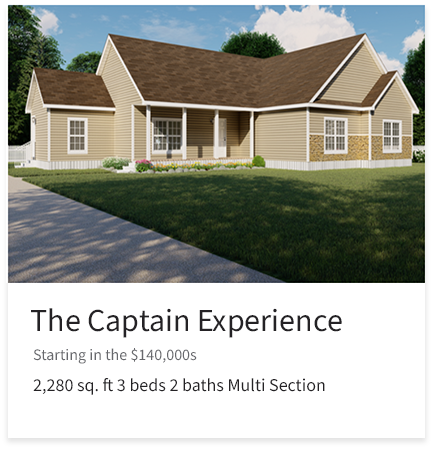
<style>
.page{position:relative;width:434px;height:450px;background:#ffffff}
.page>*{position:absolute;margin:0}
.t1{font:32px "SourceSansRoman-Regular";color:#242225}
.t2{font:16px "SourceSansRoman-Regular";color:#67686c}
.t3{font:18px "SourceSansRoman-Regular";color:#242225}
</style>
<div class="page">
<p class="t1" style="left:31px;top:308px;width:311px;height:30px">The Captain Experience</p>
<p class="t2" style="left:33px;top:348px;width:164px;height:16px">Starting in the $140,000s</p>
<p class="t3" style="left:33px;top:378px;width:292px;height:17px">2,280 sq. ft 3 beds 2 baths Multi Section</p>
</div>
